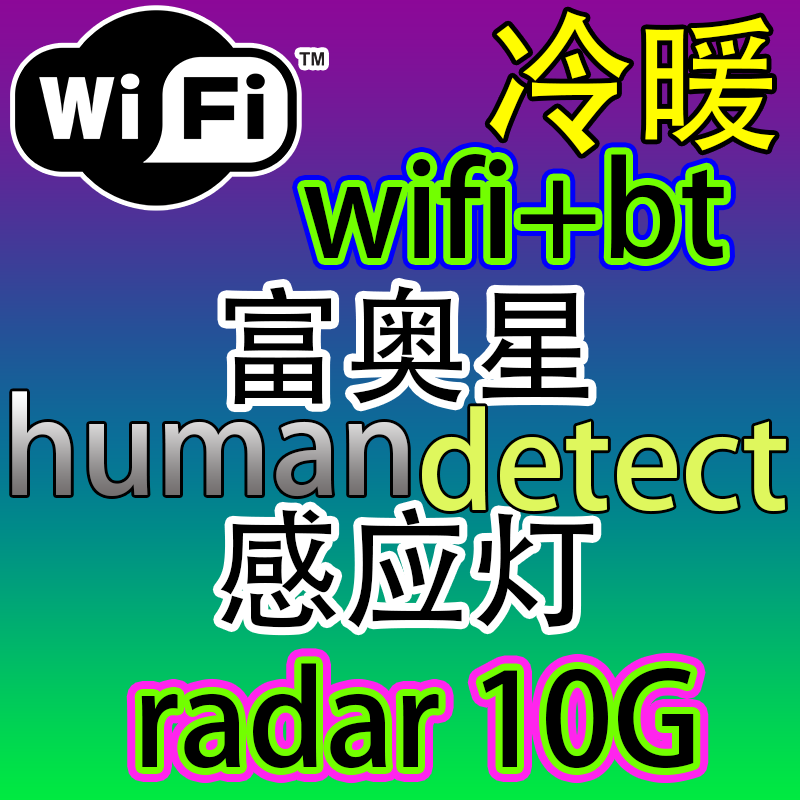
<style>
.page{position:relative;width:800px;height:800px}
.page>*{position:absolute;margin:0}
.t1{font:150px "AdobeHeitiStd-Regular";color:#fffc00}
.t2{font:128px "AdobeHeitiStd-Regular";color:#000000}
.t3{font:128px "AdobeHeitiStd-Regular"}
.t4{font:128px "AdobeHeitiStd-Regular";color:#dff75d}
</style>
<div class="page">
<p class="t1" style="left:489px;top:11px;width:286px;height:143px">冷暖</p>
<p class="t2" style="left:304px;top:154px;width:420px;height:106px">wifi+bt</p>
<p class="t2" style="left:220px;top:285px;width:374px;height:343px">富奥星<br>感应灯</p>
<p class="t3" style="left:12px;top:391px;width:396px;height:106px">human</p>
<p class="t4" style="left:422px;top:406px;width:364px;height:106px">detect</p>
<p class="t2" style="left:141px;top:663px;width:553px;height:106px">radar 10G</p>
</div>
